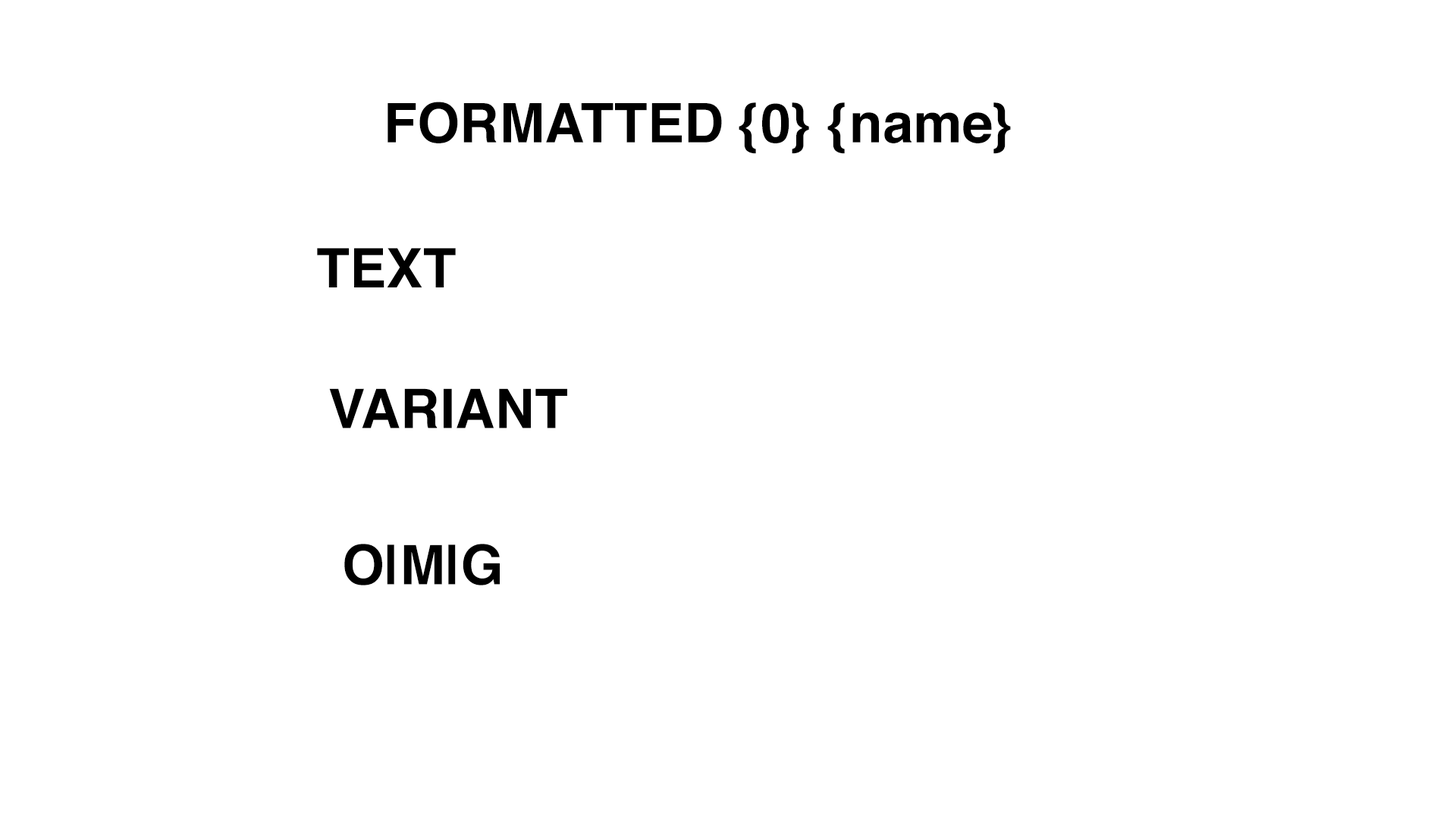
<style>
.page{position:relative;width:1456px;height:819px;background:#ffffff}
.page>*{position:absolute;margin:0}
.t1{font:54.6px "Helvetica-Bold";letter-spacing:0.003em;color:#000000}
</style>
<div class="page">
<p class="t1" style="left:388px;top:102px;width:623px;height:52px">FORMATTED {0} {name}</p>
<p class="t1" style="left:317px;top:248px;width:139px;height:39px">TEXT</p>
<p class="t1" style="left:329px;top:388px;width:238px;height:40px">VARIANT</p>
<p class="t1" style="left:344px;top:544px;width:156px;height:41px">O|M|G</p>
</div>
